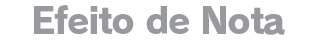
<style>
.page{position:relative;width:320px;height:40px;background:#ffffff}
.page>*{position:absolute;margin:0}
.t1{font:36px "RodinPro-EB";letter-spacing:-0.04em;color:#989a9d}
</style>
<div class="page">
<p class="t1" style="left:34px;top:5px;width:251px;height:30px">Efeito de Nota</p>
</div>
